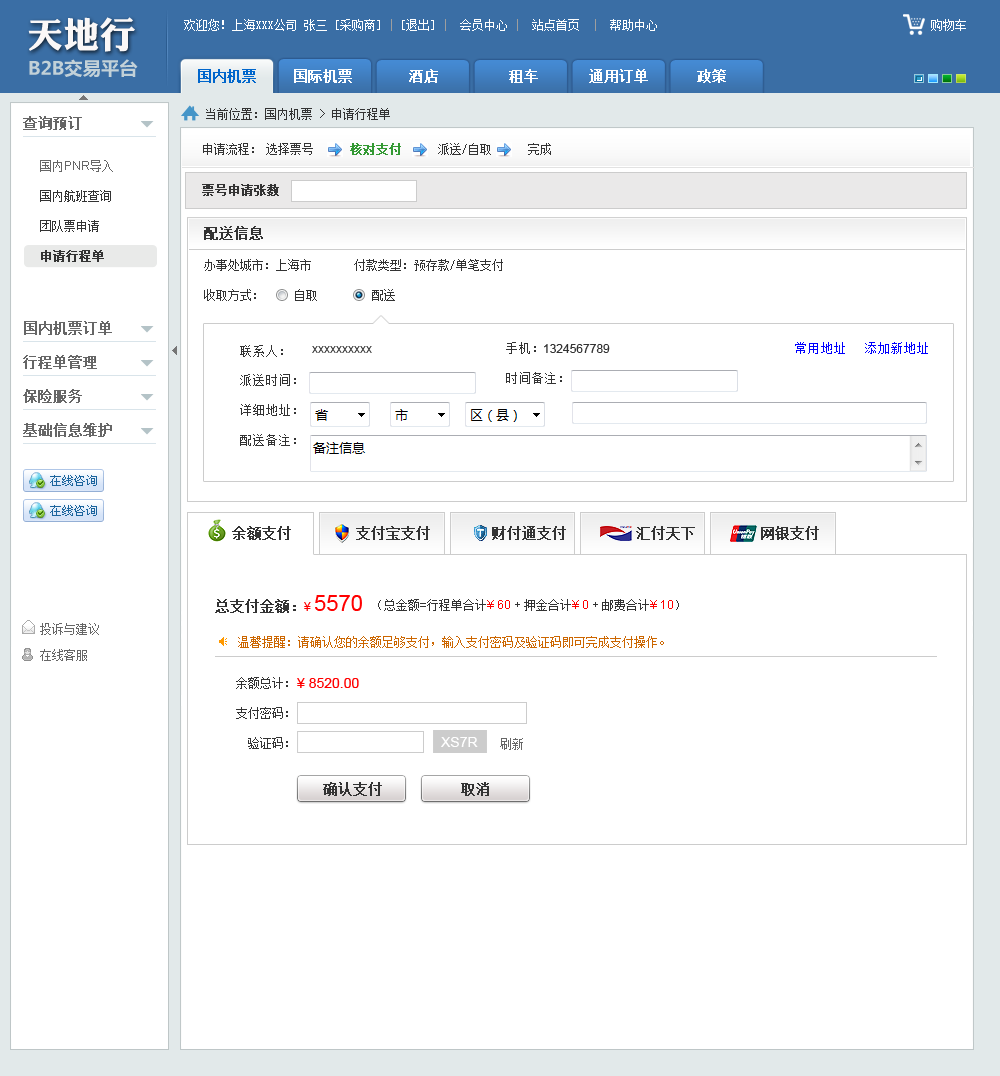
<style>
.page{position:relative;width:1000px;height:1076px;background:#ffffff}
.page>*{position:absolute;margin:0}
.t1{font:36.2px "DFPLiJinHeiW8";color:#faf7f7}
.t2{font:12px "SimSun";color:#ffffff}
.t3{font:12px "SimSun";color:#9e9e9e}
.t4{font:18.3px "MicrosoftYaHei-Bold";color:#c2d1d8}
.t5{font:14px "SimSun";color:#ffffff;font-weight:bold}
.t6{font:14px "SimSun";color:#0066cc;font-weight:bold}
.t7{font:12px "SimSun";color:#333333}
.t8{font:14px "SimSun";color:#666666;font-weight:bold}
.t9{font:12px "SimSun";color:#339933;font-weight:bold}
.t10{font:12px "ArialMT";color:#666666}
.t11{font:12px "SimSun";color:#666666}
.t12{font:12px "SimSun";color:#333333;font-weight:bold}
.t13{font:12px/30px "SimSun";color:#333333}
.t14{font:12px/30px "SimSun";color:#333333;font-weight:bold}
.t15{font:14px "SimSun";color:#333333;font-weight:bold}
.t16{font:12px "ArialMT"}
.t17{font:12px "ArialMT";color:#333333}
.t18{font:22px "ArialMT";color:#ff0000}
.t19{font:12px "ArialMT";color:#ff0000}
.t20{font:12px/26px "SimSun";color:#666666}
.t21{font:12px "SimSun";color:#cc6600}
.t22{font:14px "ArialMT";color:#ff0000}
.t23{font:14px "ArialMT";color:#ffffff}
</style>
<div class="page">
<p class="t1" style="left:28px;top:17px;width:107px;height:35px">天地行</p>
<p class="t2" style="left:184px;top:19px;width:473px;height:12px">欢迎您！上海XXX公司 张三 [采购商]<span class="t3"> | </span>[退出] <span class="t3">|</span>  会员中心 <span class="t3">|</span>  站点首页  <span class="t3">|</span>  帮助中心</p>
<p class="t2" style="left:931px;top:19px;width:35px;height:12px">购物车</p>
<p class="t4" style="left:29px;top:59px;width:109px;height:19px">B2B交易平台</p>
<p class="t5" style="left:198px;top:69px;width:528px;height:14px"><span class="t6">国内机票</span>    国际机票     酒店     租车     通用订单      政策</p>
<p class="t7" style="left:206px;top:108px;width:184px;height:12px">当前位置：国内机票 &gt; 申请行程单</p>
<p class="t8" style="left:23px;top:116px;width:59px;height:14px">查询预订</p>
<p class="t7" style="left:203px;top:143px;width:51px;height:12px">申请流程：</p>
<p class="t7" style="left:266px;top:143px;width:285px;height:12px">选择票号      <span class="t9">核对支付</span>      派送/自取      完成</p>
<p class="t10" style="left:40px;top:160px;width:73px;height:12px"><span class="t11">国内</span>PNR<span class="t11">导入</span></p>
<p class="t12" style="left:202px;top:184px;width:77px;height:12px">票号申请张数</p>
<p class="t13" style="left:40px;top:190px;width:71px;height:72px">国内航班查询<br>团队票申请<br><span class="t14">申请行程单</span></p>
<p class="t15" style="left:204px;top:226px;width:59px;height:14px">配送信息</p>
<p class="t13" style="left:204px;top:259px;width:299px;height:42px">办事处城市：上海市  付款类型：预存款/单笔支付<br>收取方式：    自取     配送</p>
<p class="t8" style="left:24px;top:321px;width:88px;height:14px">国内机票订单</p>
<p class="t16" style="left:312px;top:346px;width:60px;height:7px">xxxxxxxxxx</p>
<p class="t17" style="left:544px;top:344px;width:66px;height:9px">1324567789</p>
<p class="t8" style="left:23px;top:355px;width:74px;height:14px">行程单管理</p>
<p class="t8" style="left:23px;top:389px;width:59px;height:14px">保险服务</p>
<p class="t8" style="left:23px;top:423px;width:89px;height:14px">基础信息维护</p>
<p class="t15" style="left:232px;top:526px;width:587px;height:14px">余额支付    支付宝支付   财付通支付   汇付天下     网银支付</p>
<p class="t15" style="left:215px;top:599px;width:81px;height:14px">总支付金额：</p>
<p class="t18" style="left:304px;top:595px;width:58px;height:16px"><span class="t19">¥ </span>5570</p>
<p class="t7" style="left:378px;top:599px;width:301px;height:12px">（总金额<span class="t17">=</span>行程单合计<span class="t19">¥ </span><span class="t19">60 </span><span class="t17">+ </span>押金合计<span class="t19">¥ </span><span class="t19">0 </span><span class="t17">+ </span>邮费合计<span class="t19">¥ </span><span class="t19">10</span>）</p>
<p class="t20" style="left:40px;top:623px;width:59px;height:38px">投诉与建议 <br>在线客服</p>
<p class="t21" style="left:238px;top:636px;width:426px;height:12px">温馨提醒：请确认您的余额足够支付，输入支付密码及验证码即可完成支付操作。</p>
<p class="t13" style="left:236px;top:677px;width:52px;height:72px;text-align:right">余额总计：<br>支付密码：<br>验证码：</p>
<p class="t22" style="left:297px;top:678px;width:62px;height:10px">¥ 8520.00</p>
<p class="t23" style="left:441px;top:737px;width:37px;height:10px">XS7R</p>
<p class="t11" style="left:500px;top:738px;width:23px;height:12px">刷新</p>
<p class="t15" style="left:323px;top:782px;width:59px;height:14px">确认支付</p>
<p class="t15" style="left:461px;top:782px;width:28px;height:14px">取消</p>
</div>
